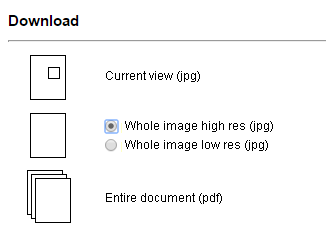
<style>
.page{position:relative;width:326px;height:235px;background:#ffffff}
.page>*{position:absolute;margin:0}
.t1{font:11.7px "ArialMT";color:#000000}
</style>
<div class="page">
<p class="t1" style="left:106px;top:71px;width:94px;height:11px">Current view (jpg)</p>
<p class="t1" style="left:125px;top:121px;width:148px;height:11px">Whole image high res (jpg)</p>
<p class="t1" style="left:125px;top:140px;width:143px;height:11px">Whole image low res (jpg)</p>
<p class="t1" style="left:106px;top:193px;width:116px;height:11px">Entire document (pdf)</p>
</div>
